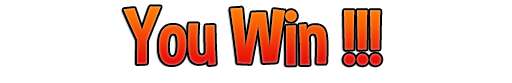
<style>
.page{position:relative;width:512px;height:83px;background:#ffffff}
.page>*{position:absolute;margin:0}
.t1{font:80px "DimboRegular"}
</style>
<div class="page">
<p class="t1" style="left:123px;top:6px;width:259px;height:60px">You Win !!!</p>
</div>
